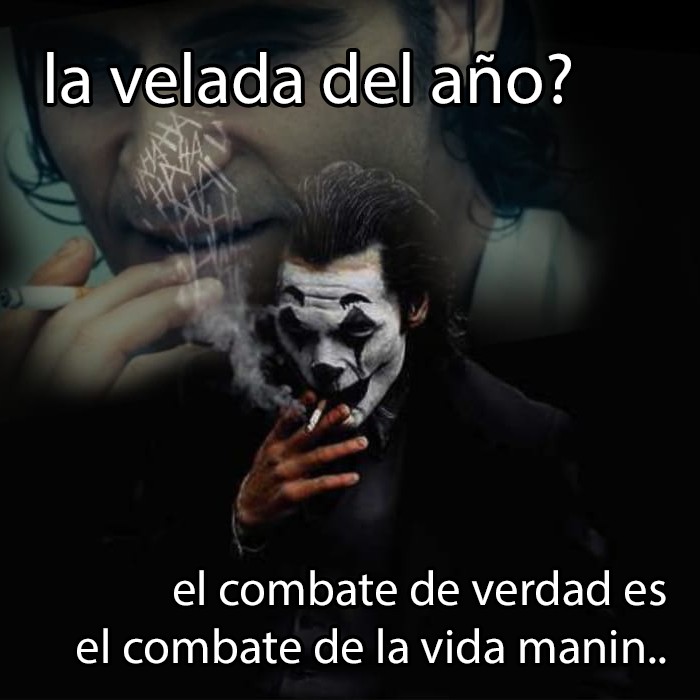
<style>
.page{position:relative;width:700px;height:700px;background:#040404}
.page>*{position:absolute;margin:0}
.t1{font:72px "MyriadPro-Regular";color:#ffffff}
.t2{font:48.8px "MyriadPro-Regular";color:#ffffff}
</style>
<div class="page">
<p class="t1" style="left:47px;top:52px;width:524px;height:52px">la velada del año?</p>
<p class="t2" style="left:77px;top:570px;width:589px;height:94px;text-align:right">el combate de verdad es<br>el combate de la vida manin..</p>
</div>
